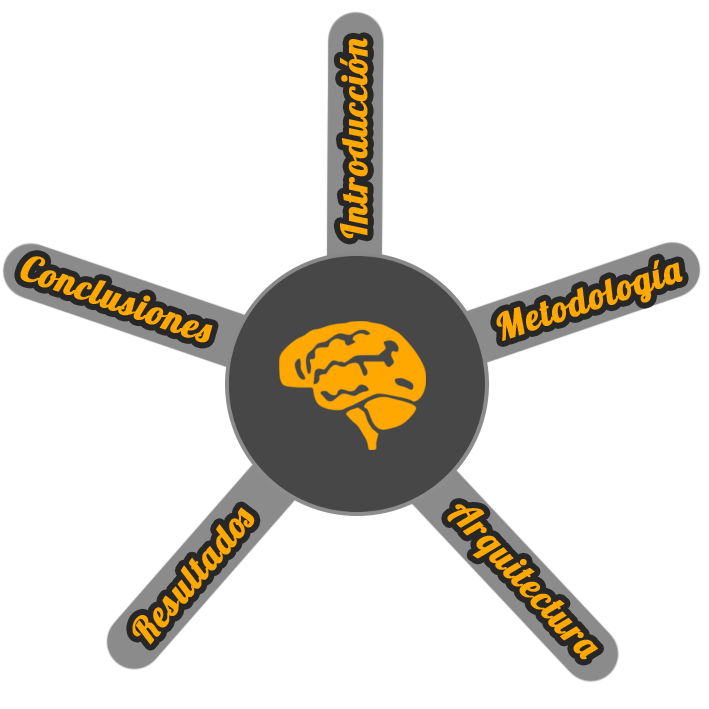
<style>
.page{position:relative;width:709px;height:709px;background:#ffffff}
.page>*{position:absolute;margin:0}
.t1{font:36px "Lobster1.4";letter-spacing:0.03em;color:#ffa801;font-weight:bold}
</style>
<div class="page">
<p class="t1" style="left:340px;top:38px;width:28px;height:201px;rotate:-90deg">Introducción</p>
<p class="t1" style="left:20px;top:256px;width:193px;height:87px;rotate:19deg">Conclusiones</p>
<p class="t1" style="left:496px;top:259px;width:187px;height:82px;rotate:-19deg">Metodología</p>
<p class="t1" style="left:132px;top:507px;width:123px;height:138px;rotate:-49deg">Resultados</p>
<p class="t1" style="left:447px;top:504px;width:151px;height:156px;rotate:47deg">Arquitectura</p>
</div>
